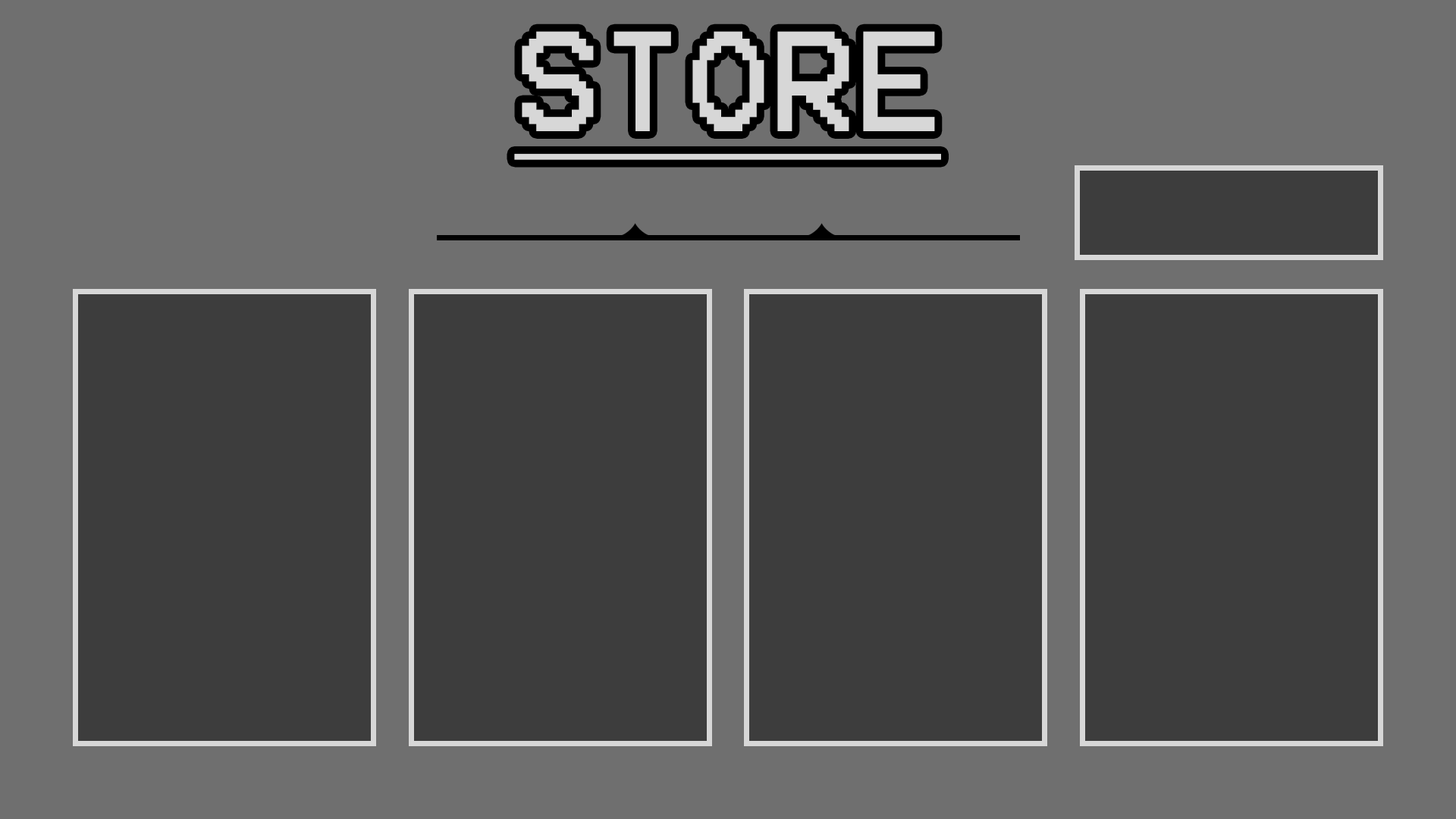
<style>
.page{position:relative;width:1456px;height:819px;background:#3d3d3d}
.page>*{position:absolute;margin:0}
.t1{font:113.7px "Terminal";color:#d7d7d7;text-decoration:underline}
</style>
<div class="page">
<p class="t1" style="left:514px;top:31px;width:427px;height:129px">STORE</p>
</div>
